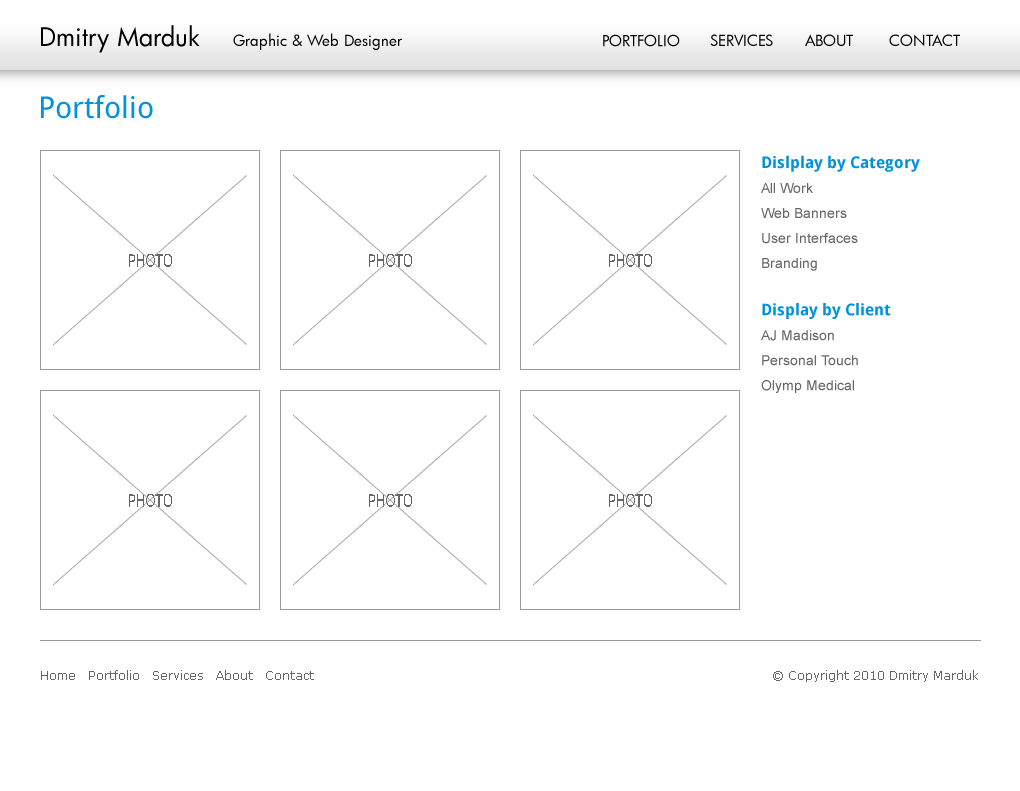
<style>
.page{position:relative;width:1020px;height:791px;background:#ffffff}
.page>*{position:absolute;margin:0}
.t1{font:25px "FuturaBk";color:#000000}
.t2{font:15px "FuturaBk";color:#000000}
.t3{font:30px "DroidSans";color:#0093dc}
.t4{font:14px/25px "ArialMT";color:#666666}
.t5{font:16px/22.2px "DroidSans-Bold";color:#0092dc}
</style>
<div class="page">
<p class="t1" style="left:41px;top:25px;width:159px;height:28px">Dmitry Marduk</p>
<p class="t2" style="left:233px;top:33px;width:169px;height:17px">Graphic &amp; Web Designer</p>
<p class="t2" style="left:603px;top:34px;width:77px;height:13px">PORTFOLIO</p>
<p class="t2" style="left:710px;top:34px;width:63px;height:12px">SERVICES</p>
<p class="t2" style="left:805px;top:34px;width:48px;height:12px">ABOUT</p>
<p class="t2" style="left:889px;top:34px;width:71px;height:12px">CONTACT</p>
<p class="t3" style="left:41px;top:95px;width:112px;height:24px">Portfolio</p>
<p class="t4" style="left:761px;top:155px;width:159px;height:238px"><span class="t5">Dislplay by Category<br></span>All Work          <br>Web Banners          <br>User Interfaces          <br>Branding<br><br><span class="t5">Display by Client<br></span>AJ Madison         <br>Personal Touch     <br>Olymp Medical</p>
</div>
